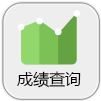
<style>
.page{position:relative;width:101px;height:101px;background:#eeeeee}
.page>*{position:absolute;margin:0}
.t1{font:16px "MicrosoftYaHei";color:#000000}
</style>
<div class="page">
<p class="t1" style="left:17px;top:71px;width:64px;height:17px">成绩查询</p>
</div>
